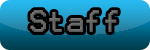
<style>
.page{position:relative;width:150px;height:50px}
.page>*{position:absolute;margin:0}
.t1{font:24.7px "Terminal";color:#686868}
</style>
<div class="page">
<p class="t1" style="left:30px;top:10px;width:88px;height:22px">Staff</p>
</div>
